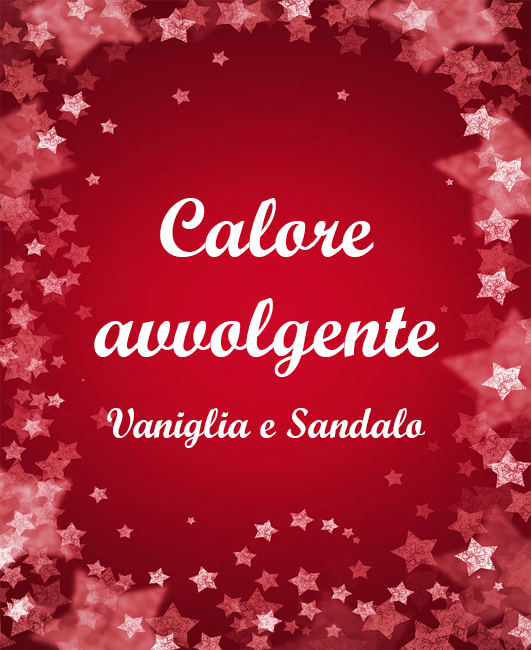
<style>
.page{position:relative;width:531px;height:650px}
.page>*{position:absolute;margin:0}
.t1{font:83.3px "ScriptMTBold";color:#ffffff}
.t2{font:41.7px "ScriptMTBold";color:#ffffff}
</style>
<div class="page">
<p class="t1" style="left:94px;top:198px;width:345px;height:179px;text-align:center">Calore <br>avvolgente</p>
<p class="t2" style="left:107px;top:408px;width:318px;height:40px">Vaniglia e Sandalo</p>
</div>
